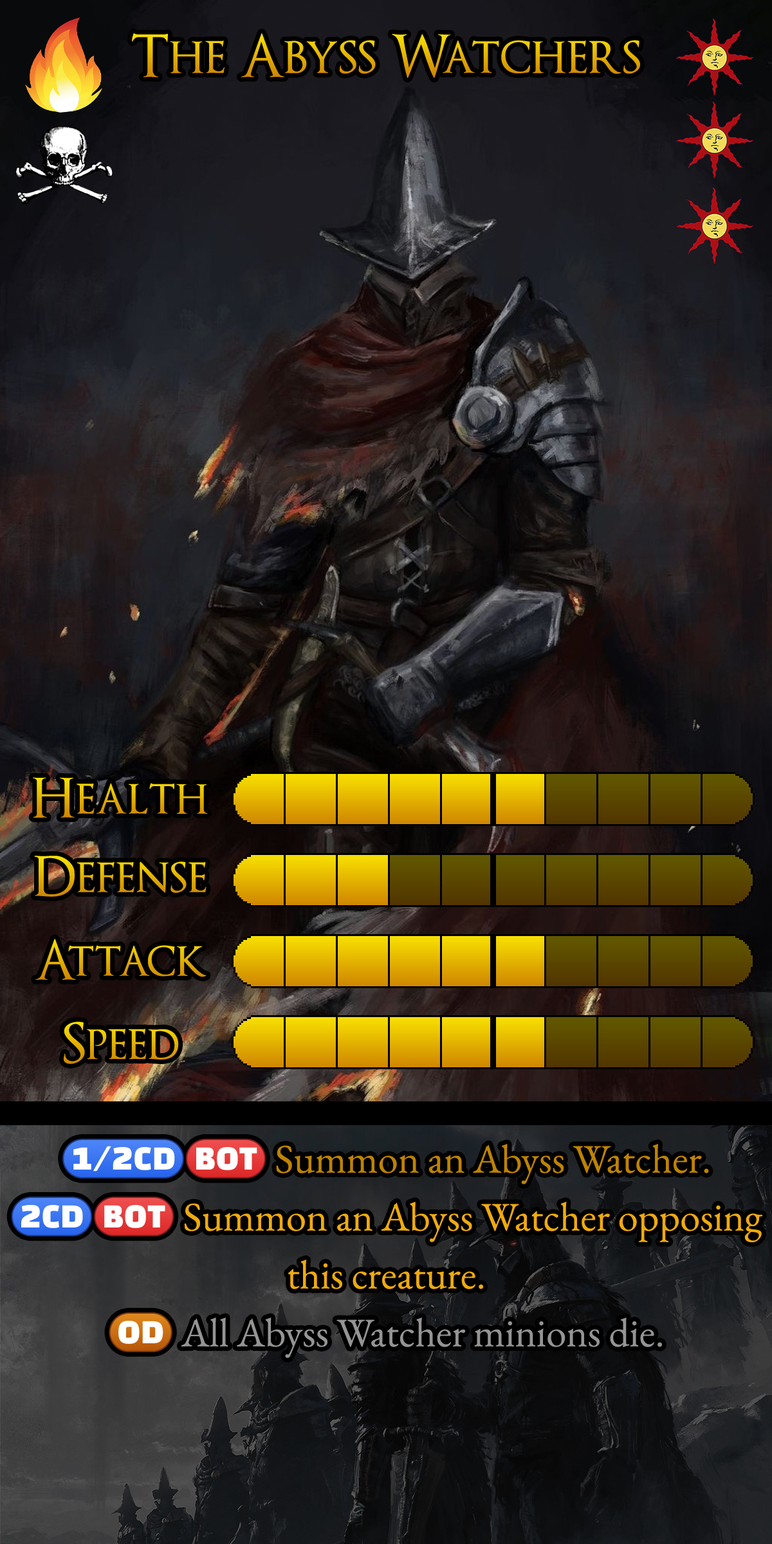
<style>
.page{position:relative;width:772px;height:1544px}
.page>*{position:absolute;margin:0}
.t1{font:57.9px "OptimusPrinceps"}
.t2{font:92.7px "OptimusPrinceps"}
.t3{font:69.5px/57.9px "EBGaramond-Regular"}
.t4{font:69.5px/57.9px "stoogedings-Regular"}
</style>
<div class="page">
<p class="t1" style="left:132px;top:33px;width:508px;height:46px">The Abyss Watchers</p>
<p class="t2" style="left:33px;top:777px;width:175px;height:41px">Health</p>
<p class="t2" style="left:34px;top:856px;width:173px;height:41px">Defense</p>
<p class="t2" style="left:35px;top:939px;width:172px;height:42px">Attack</p>
<p class="t2" style="left:64px;top:1022px;width:115px;height:42px">Speed</p>
<p class="t3" style="left:11px;top:1139px;width:752px;height:219px;text-align:center"><span class="t4">(1/2CD)(BOT)</span> Summon an Abyss Watcher.<br><span class="t4">(2CD)(BOT)</span> Summon an Abyss Watcher opposing this creature.<br><span class="t4">(OD)</span> All Abyss Watcher minions die.</p>
</div>
